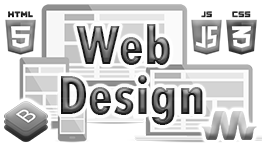
<style>
.page{position:relative;width:262px;height:146px;background:#ffffff}
.page>*{position:absolute;margin:0}
.t1{font:58.3px/50px "TwCenMT-CondensedExtraBold"}
</style>
<div class="page">
<p class="t1" style="left:61px;top:24px;width:142px;height:101px;text-align:center">Web <br>Design</p>
</div>
